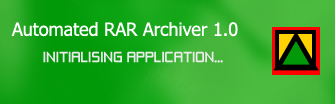
<style>
.page{position:relative;width:335px;height:104px}
.page>*{position:absolute;margin:0}
.t1{font:18px "Tahoma";color:#ffffff}
.t2{font:14px "ZeroThrees";color:#ebebeb}
</style>
<div class="page">
<p class="t1" style="left:11px;top:22px;width:227px;height:15px">Automated RAR Archiver 1.0</p>
<p class="t2" style="left:43px;top:51px;width:180px;height:12px">INITIALISING APPLICATION...</p>
</div>
